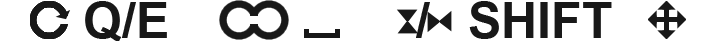
<style>
.page{position:relative;width:705px;height:41px;background:#ffffff}
.page>*{position:absolute;margin:0}
.t1{font:49.9px "Arial-BoldMT";color:#181818}
</style>
<div class="page">
<p class="t1" style="left:85px;top:1px;width:82px;height:41px">Q/E</p>
<p class="t1" style="left:469px;top:1px;width:143px;height:38px">SHIFT</p>
</div>
